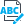
<style>
.page{position:relative;width:24px;height:24px;background:#ffffff}
.page>*{position:absolute;margin:0}
.t1{font:10px "SegoeUIBlack";color:#00aced;scale:0.9 1}
</style>
<div class="page">
<p class="t1" style="left:0px;top:7px;width:19px;height:7px">ABC</p>
</div>
